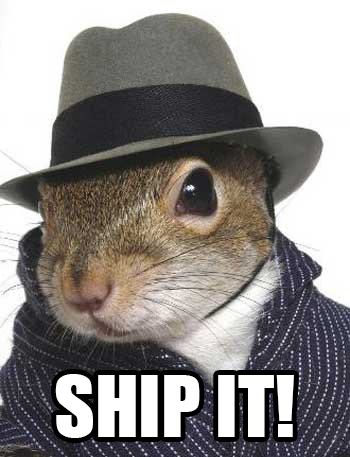
<style>
.page{position:relative;width:350px;height:457px;background:#ffffff}
.page>*{position:absolute;margin:0}
.t1{font:79px "Impact";color:#ffffff}
</style>
<div class="page">
<p class="t1" style="left:55px;top:374px;width:239px;height:64px">SHIP IT!</p>
</div>
